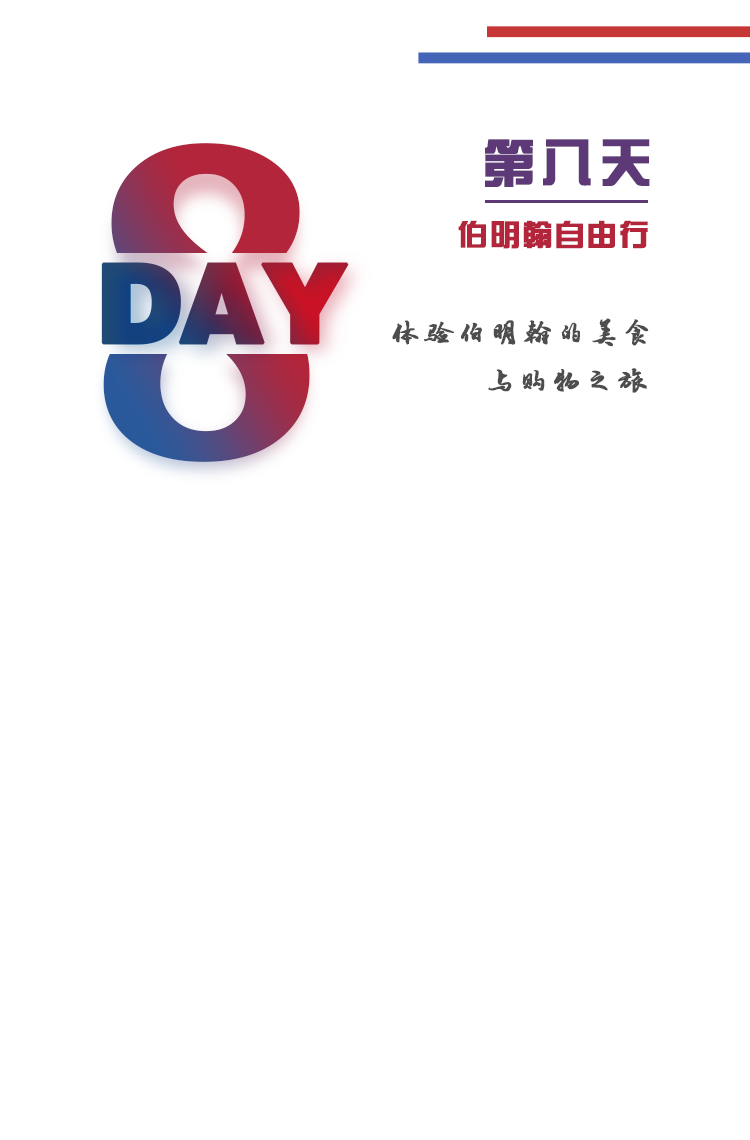
<style>
.page{position:relative;width:750px;height:1140px;background:#ffffff}
.page>*{position:absolute;margin:0}
.t1{font:432.9px "News706BT-BoldC";letter-spacing:-0.05em;font-weight:bold}
.t2{font:52px "FZZYJW--GB1-0";letter-spacing:0.1em;color:#5d3a77;font-weight:bold}
.t3{font:30px "FZZYJW--GB1-0";letter-spacing:0.05em;color:#b3253a;font-weight:bold}
.t4{font:110px "FZCCHJW--GB1-0";letter-spacing:-0.05em;font-weight:bold}
.t5{font:30px/48px "·½ÕýÂÀ½¨µÂ×ÖÌå";letter-spacing:0.075em;color:#4d4d4d;font-weight:bold}
</style>
<div class="page">
<p class="t1" style="left:103px;top:143px;width:207px;height:319px">8</p>
<p class="t2" style="left:485px;top:139px;width:165px;height:48px">第八天</p>
<p class="t3" style="left:458px;top:220px;width:190px;height:29px">伯明翰自由行</p>
<p class="t4" style="left:101px;top:262px;width:248px;height:83px">DAY</p>
<p class="t5" style="left:392px;top:318px;width:257px;height:75px">体验伯明翰的美食<br>      与购物之旅</p>
</div>
